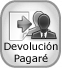
<style>
.page{position:relative;width:62px;height:68px}
.page>*{position:absolute;margin:0}
.t1{font:10px "Verdana";color:#000000}
</style>
<div class="page">
<p class="t1" style="left:4px;top:42px;width:54px;height:22px;text-align:center">Devolución<br>Pagaré</p>
</div>
